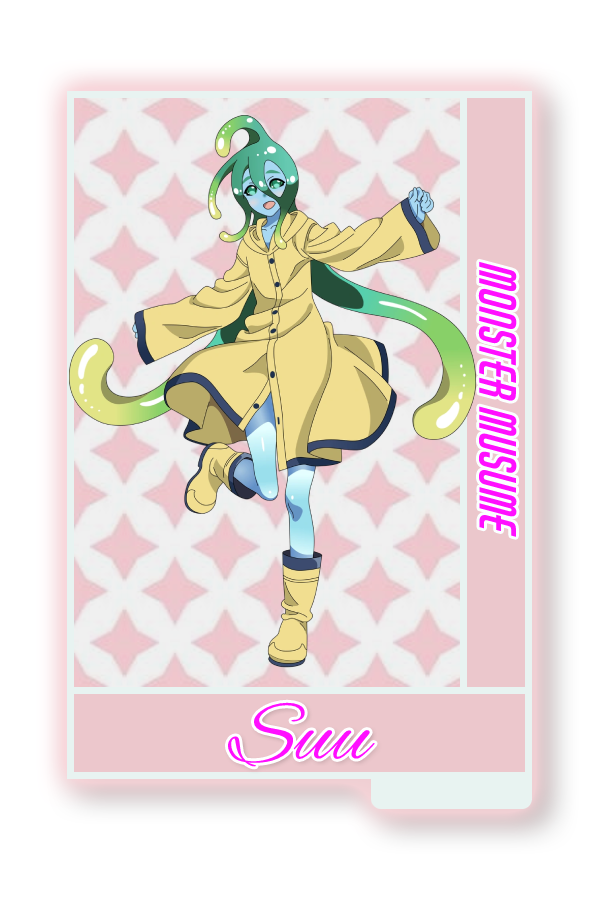
<style>
.page{position:relative;width:600px;height:900px;background:#ffffff}
.page>*{position:absolute;margin:0}
.t1{font:48.8px "AirAmerica-Regular";color:#ff0fff}
.t2{font:88.3px "AlexBrush-Regular";color:#ff0fff}
</style>
<div class="page">
<p class="t1" style="left:478px;top:261px;width:39px;height:276px;rotate:90deg">Monster Musume</p>
<p class="t2" style="left:227px;top:702px;width:148px;height:65px">Suu</p>
</div>
